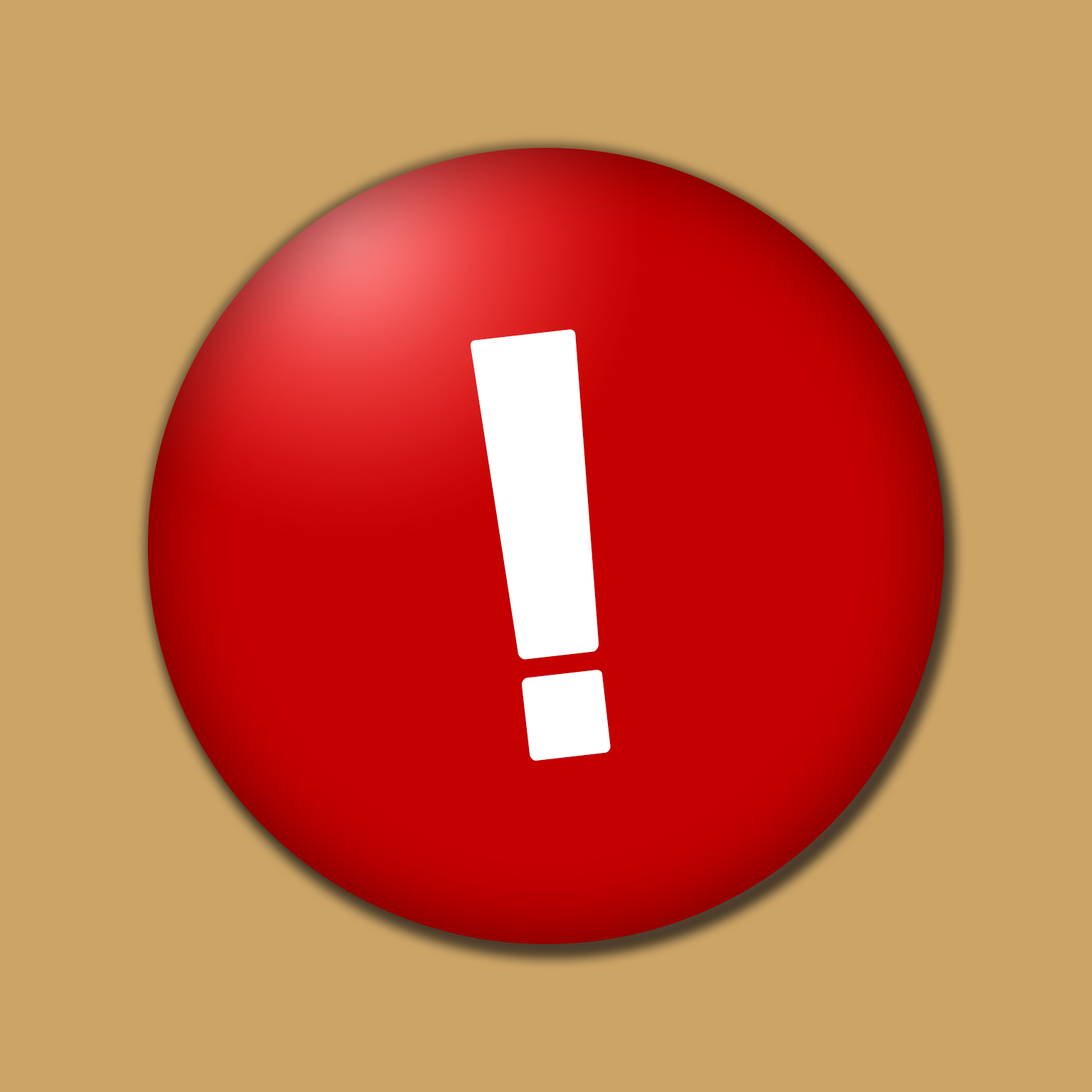
<style>
.page{position:relative;width:1092px;height:1092px;background:#cca466}
.page>*{position:absolute;margin:0}
.t1{font:565.9px "PoplarStd";color:#ffffff}
</style>
<div class="page">
<p class="t1" style="left:470px;top:329px;width:141px;height:432px;rotate:-7deg">!</p>
</div>
